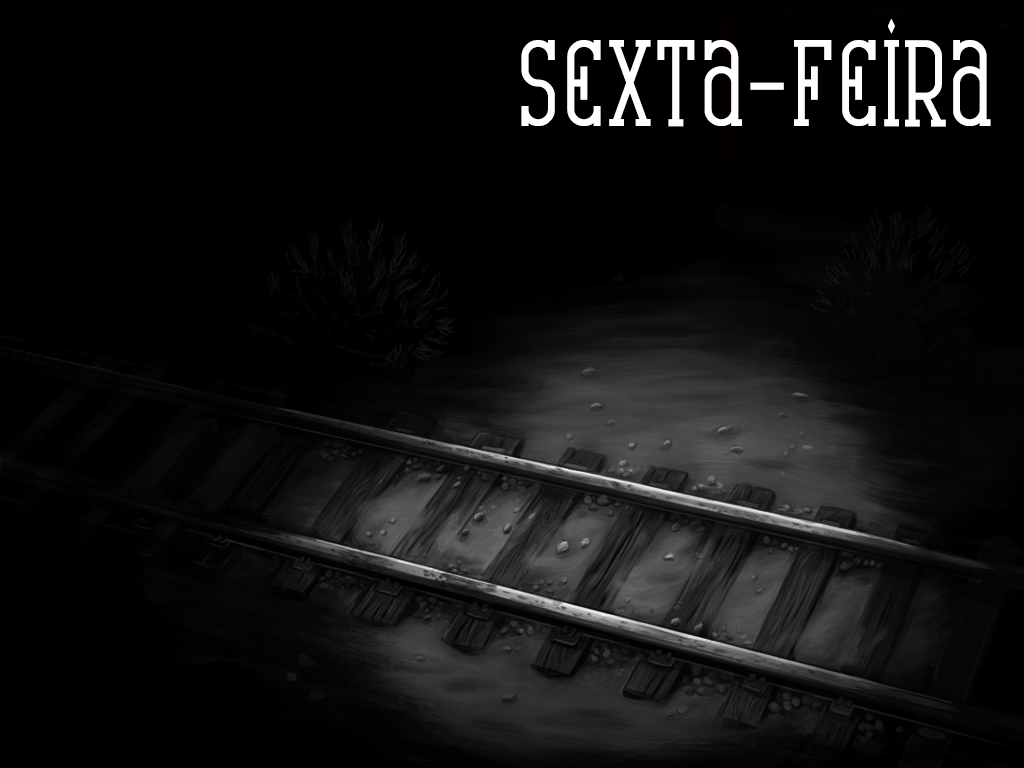
<style>
.page{position:relative;width:1024px;height:768px;background:#000000}
.page>*{position:absolute;margin:0}
.t1{font:132px "CatharsisRequiemBold";letter-spacing:-0.003em;color:#ffffff}
</style>
<div class="page">
<p class="t1" style="left:521px;top:19px;width:470px;height:108px">sexta-feira</p>
</div>
